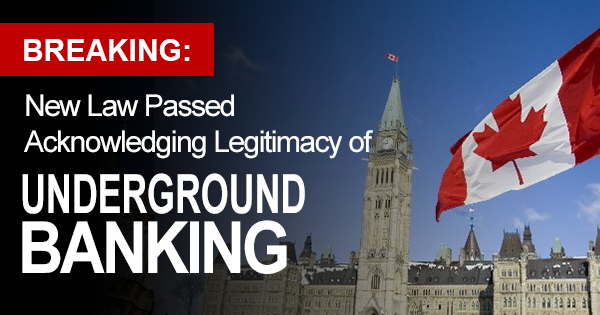
<style>
.page{position:relative;width:600px;height:315px}
.page>*{position:absolute;margin:0}
.t1{font:30px "Arial-BoldMT";color:#ffffff}
.t2{font:30px "ArialMT";letter-spacing:-0.05em;color:#ffffff}
.t3{font:54px "Arial-BoldMT";letter-spacing:-0.005em;color:#ffffff;scale:0.67 1}
.t4{font:72px "Arial-BoldMT";letter-spacing:-0.05em;color:#ffffff;scale:0.87 1}
</style>
<div class="page">
<p class="t1" style="left:24px;top:39px;width:166px;height:22px">BREAKING:</p>
<p class="t2" style="left:24px;top:94px;width:349px;height:65px">New Law Passed<br>Acknowledging Legitimacy of</p>
<p class="t3" style="left:22px;top:173px;width:283px;height:41px">UNDERGROUND</p>
<p class="t4" style="left:22px;top:220px;width:265px;height:54px">BANKING</p>
</div>
